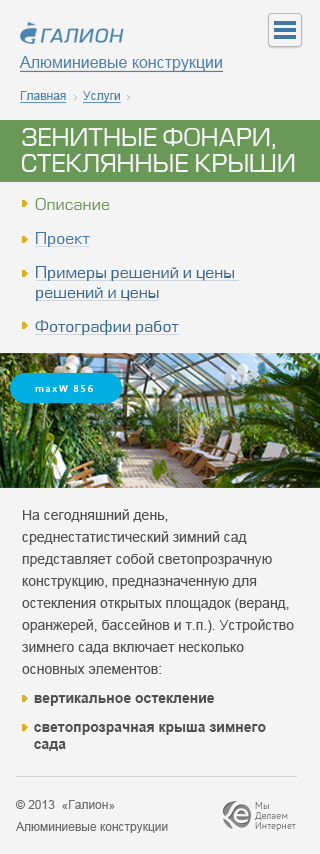
<style>
.page{position:relative;width:320px;height:854px;background:#f4f4f4}
.page>*{position:absolute;margin:0}
.t1{font:16px "ArialMT";color:#4a84b2;text-decoration:underline}
.t2{font:12px "ArialMT";color:#4a84b3;text-decoration:underline}
.t3{font:24px/26px "EuropeNormal";color:#f4f4f4;text-transform:uppercase}
.t4{font:16px/34px "EuropeNormal";color:#356892;text-decoration:underline}
.t5{font:16px/34px "EuropeNormal";color:#6a9856}
.t6{font:16px/34px "EuropeNormal";color:#3f78a7;text-decoration:underline}
.t7{font:16px/20px "EuropeNormal";color:#356892;text-decoration:underline}
.t8{font:10.1px "MyriadPro-Regular";letter-spacing:0.18em;color:#ffffff}
.t9{font:14px/22px "ArialMT";color:#515151}
.t10{font:14px/29px "Arial-BoldMT";color:#515151}
.t11{font:14px/17px "Arial-BoldMT";color:#515151}
.t12{font:12px/22px "ArialMT";color:#6d6d6d}
.t13{font:12px/14px "ArialMT";color:#6d6d6d}
.t14{font:10px/10px "PTSans-Regular";color:#636363}
</style>
<div class="page">
<p class="t1" style="left:19px;top:56px;width:204px;height:17px">Алюминиевые конструкции</p>
<p class="t2" style="left:20px;top:91px;width:101px;height:13px">Главная     Услуги</p>
<p class="t3" style="left:21px;top:128px;width:274px;height:44px">Зенитные фонари, <br>стеклянные крыши</p>
<p class="t4" style="left:35px;top:198px;width:204px;height:137px"><span class="t5">Описание         <br></span><span class="t6">Проект<br></span>Примеры решений и цены <br><span class="t7">решений и цены<br></span>Фотографии работ</p>
<p class="t8" style="left:35px;top:385px;width:58px;height:7px">maxW 856</p>
<p class="t9" style="left:22px;top:509px;width:272px;height:242px">На сегодняшний день, среднестатистический зимний сад представляет собой светопрозрачную конструкцию, предназначенную для остекления открытых площадок (веранд, оранжерей, бассейнов и т.п.). Устройство зимнего сада включает несколько основных элементов:<br><span class="t10">   вертикальное остекление<br>   светопрозрачная крыша зимнего <br></span><span class="t11">   сада</span></p>
<p class="t12" style="left:15px;top:800px;width:153px;height:33px">© 2013  «Галион»<br>Алюминиевые <span class="t13">конструкции</span></p>
<p class="t14" style="left:255px;top:802px;width:41px;height:29px">Мы <br>Делаем<br>Интернет</p>
</div>
